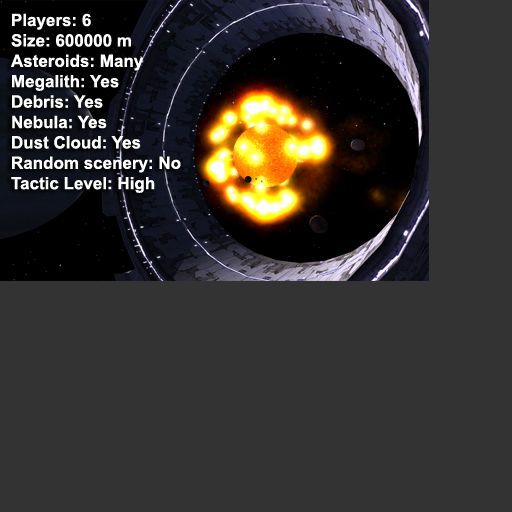
<style>
.page{position:relative;width:512px;height:512px;background:#333333}
.page>*{position:absolute;margin:0}
.t1{font:17px "Arial-BoldMT";color:#ffffff}
</style>
<div class="page">
<p class="t1" style="left:11px;top:13px;width:170px;height:180px">Players: 6<br>Size: 600000 m<br>Asteroids: Many<br>Megalith: Yes<br>Debris: Yes<br>Nebula: Yes<br>Dust Cloud: Yes<br>Random scenery: No<br>Tactic Level: High</p>
</div>
